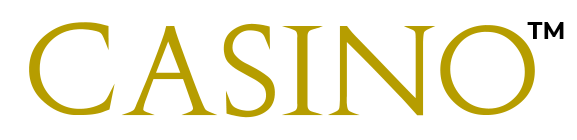
<style>
.page{position:relative;width:577px;height:140px;background:#ffffff}
.page>*{position:absolute;margin:0}
.t1{font:120px "Augustus";color:#b69d00}
.t2{font:24px "Montserrat-Bold";color:#000000}
</style>
<div class="page">
<p class="t1" style="left:29px;top:22px;width:506px;height:96px">casino</p>
<p class="t2" style="left:527px;top:22px;width:37px;height:17px">TM</p>
</div>
